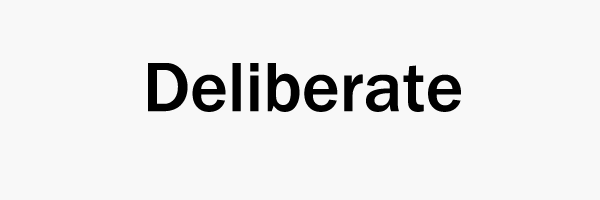
<style>
.page{position:relative;width:600px;height:200px;background:#f8f8f8}
.page>*{position:absolute;margin:0}
.t1{font:72px "FranklinGothic-Medium";color:#000000}
</style>
<div class="page">
<p class="t1" style="left:148px;top:63px;width:313px;height:49px">Deliberate</p>
</div>
